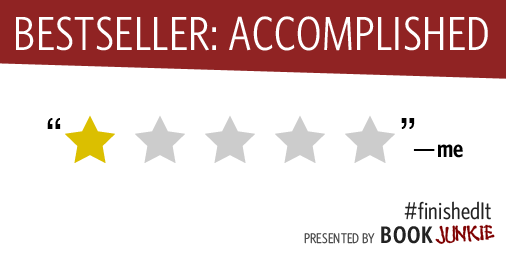
<style>
.page{position:relative;width:506px;height:253px;background:#ffffff}
.page>*{position:absolute;margin:0}
.t1{font:48px "WhitneyCondensed-Book";letter-spacing:0.01em;color:#ffffff}
.t2{font:42px "HelveticaNeue";letter-spacing:0.01em;color:#000000}
.t3{font:25.2px "WhitneyCondensed-Semibold";letter-spacing:0.01em;color:#000000}
.t4{font:25.2px "HelveticaNeue";letter-spacing:0.01em;color:#000000}
.t5{font:24px "WhitneyCondensed-Book";letter-spacing:0.01em;color:#222222}
.t6{font:14px "WhitneyCondensed-Book";letter-spacing:0.01em;color:#4c4c4c}
.t7{font:24px "WhitneyCondensed-Semibold";letter-spacing:0.04em;color:#222222}
.t8{font:24px "WakingtheWitch";letter-spacing:0.028em;color:#7f0101;font-weight:bold}
</style>
<div class="page">
<p class="t1" style="left:16px;top:16px;width:472px;height:35px">BESTSELLER: ACCOMPLISHED</p>
<p class="t2" style="left:47px;top:118px;width:14px;height:11px">“</p>
<p class="t2" style="left:401px;top:118px;width:14px;height:11px">”</p>
<p class="t3" style="left:413px;top:144px;width:50px;height:14px"><span class="t4">―</span>me</p>
<p class="t5" style="left:404px;top:201px;width:87px;height:19px">#finishedIt</p>
<p class="t6" style="left:304px;top:233px;width:71px;height:11px">PRESENTED BY</p>
<p class="t7" style="left:381px;top:226px;width:52px;height:18px">BOOK</p>
<p class="t8" style="left:435px;top:224px;width:60px;height:20px;rotate:-3deg">JUNKIE</p>
</div>
